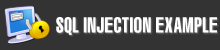
<style>
.page{position:relative;width:220px;height:50px;background:#333333}
.page>*{position:absolute;margin:0}
.t1{font:20.8px "VNI-Swiss-Condense-Bold";color:#ffffff;text-transform:uppercase;scale:0.77 1}
</style>
<div class="page">
<p class="t1" style="left:56px;top:17px;width:161px;height:18px">SQL injection example</p>
</div>
